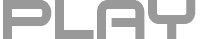
<style>
.page{position:relative;width:200px;height:39px;background:#ffffff}
.page>*{position:absolute;margin:0}
.t1{font:75px "Bitsumishi";color:#999999}
</style>
<div class="page">
<p class="t1" style="left:3px;top:0px;width:193px;height:39px">Play</p>
</div>
